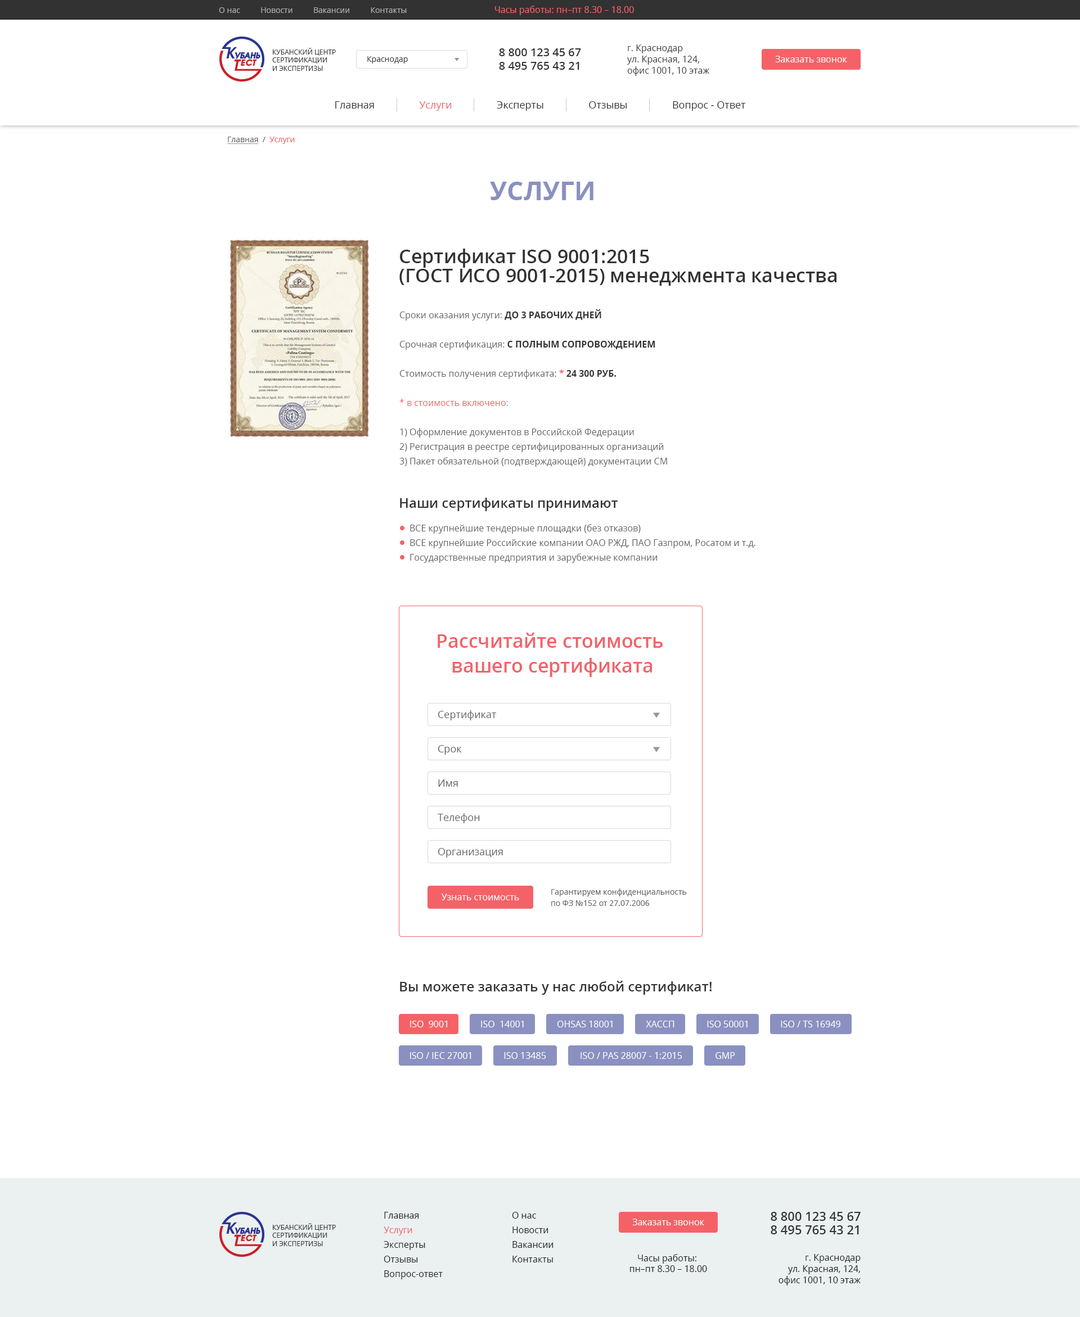
<style>
.page{position:relative;width:1080px;height:1317px;background:#ffffff}
.page>*{position:absolute;margin:0}
.t1{font:9px "OpenSans";color:#f46267}
.t2{font:7.9px "OpenSans";color:#aaaaaa}
.t3{font:6.8px "OpenSans";color:#3c3c3c;text-transform:uppercase}
.t4{font:11.2px "OpenSans-Semibold";color:#323232}
.t5{font:9px/11.2px "OpenSans";color:#3c3c3c}
.t6{font:7.9px "OpenSans";color:#3c3c3c}
.t7{font:9px "OpenSans";color:#ffffff}
.t8{font:10.1px "OpenSans";color:#323232}
.t9{font:10.1px "OpenSans";color:#f46267}
.t10{font:7.9px "OpenSans";color:#646464;text-decoration:underline}
.t11{font:7.9px "OpenSans";color:#646464}
.t12{font:7.9px "OpenSans";color:#f46267}
.t13{font:25.9px "OpenSans-Bold";color:#8a91c1;text-transform:uppercase}
.t14{font:19.1px/19.1px "OpenSans-Semibold";color:#323232}
.t15{font:9px/14.6px "OpenSans";color:#646464}
.t16{font:9px/14.6px "OpenSans-Bold";color:#323232;text-transform:uppercase}
.t17{font:9px/14.6px "OpenSans-Bold";color:#f46267}
.t18{font:9px/14.6px "OpenSans";color:#f46267}
.t19{font:13.5px "OpenSans-Semibold";color:#323232}
.t20{font:19.1px/24.8px "OpenSans-Semibold";color:#f46267}
.t21{font:10.1px "OpenSans";color:#646464}
.t22{font:7.9px/11.2px "OpenSans";color:#646464}
.t23{font:9px "OpenSans";color:#ffffff;text-transform:uppercase}
.t24{font:9px/14.6px "OpenSans";color:#1e1e1e}
.t25{font:12.4px "OpenSans-Semibold";color:#323232}
.t26{font:9px "OpenSans";color:#1e1e1e}
.t27{font:9px/11.2px "OpenSans";color:#1e1e1e}
</style>
<div class="page">
<p class="t1" style="left:495px;top:6px;width:139px;height:9px">Часы работы: пн–пт 8.30 – 18.00</p>
<p class="t2" style="left:219px;top:7px;width:188px;height:6px">О нас          Новости          Вакансии          Контакты</p>
<p class="t3" style="left:272px;top:48px;width:64px;height:23px">Кубанский центр<br>сертификации<br>и экспертизы</p>
<p class="t4" style="left:499px;top:48px;width:82px;height:8px">8 800 123 45 67</p>
<p class="t5" style="left:627px;top:44px;width:83px;height:32px">г. Краснодар<br>ул. Красная, 124, <br>офис 1001, 10 этаж</p>
<p class="t6" style="left:367px;top:56px;width:41px;height:8px">Краснодар</p>
<p class="t4" style="left:499px;top:62px;width:80px;height:8px">8 495 765 43 21</p>
<p class="t7" style="left:775px;top:56px;width:72px;height:6px">Заказать звонок</p>
<p class="t8" style="left:335px;top:101px;width:411px;height:10px">Главная                 <span class="t9">Услуги                 </span>Эксперты                 Отзывы                 Вопрос - Ответ</p>
<p class="t10" style="left:227px;top:137px;width:68px;height:7px">Главная<span class="t11">  /  </span><span class="t12">Услуги</span></p>
<p class="t13" style="left:490px;top:182px;width:103px;height:18px">Услуги</p>
<p class="t14" style="left:399px;top:249px;width:438px;height:37px">Сертификат ISO 9001:2015<br>(ГОСТ ИСО 9001-2015) менеджмента качества</p>
<p class="t15" style="left:399px;top:309px;width:268px;height:158px">Сроки оказания услуги: <span class="t16">До 3 рабочих дней<br></span><br>Срочная сертификация: <span class="t16">С полным сопровождением<br></span><br>Стоимость получения сертификата: <span class="t17">* </span><span class="t16">24 300 руб.<br><br></span><span class="t18">* в стоимость включено:<br><br></span>1) Оформление документов в Российской Федерации<br>2) Регистрация в реестре сертифицированных организаций <br>3) Пакет обязательной (подтверждающей) документации СМ</p>
<p class="t19" style="left:400px;top:498px;width:218px;height:13px">Наши сертификаты принимают</p>
<p class="t15" style="left:410px;top:524px;width:345px;height:39px">ВСЕ крупнейшие тендерные площадки (без отказов)<br>ВСЕ крупнейшие Российские компании ОАО РЖД, ПАО Газпром, Росатом и т.д.<br>Государственные предприятия и зарубежные компании</p>
<p class="t20" style="left:438px;top:633px;width:225px;height:44px;text-align:center">Рассчитайте стоимость <br>вашего сертификата</p>
<p class="t21" style="left:438px;top:710px;width:59px;height:11px">Сертификат</p>
<p class="t21" style="left:438px;top:745px;width:24px;height:10px">Срок</p>
<p class="t21" style="left:438px;top:780px;width:20px;height:7px">Имя</p>
<p class="t21" style="left:438px;top:813px;width:42px;height:11px">Телефон</p>
<p class="t21" style="left:438px;top:848px;width:65px;height:10px">Организация</p>
<p class="t7" style="left:442px;top:894px;width:77px;height:7px">Узнать стоимость</p>
<p class="t22" style="left:551px;top:889px;width:136px;height:17px">Гарантируем конфиденциальность<br>по ФЗ №152 от 27.07.2006</p>
<p class="t19" style="left:400px;top:981px;width:312px;height:14px">Вы можете заказать у нас любой сертификат!</p>
<p class="t23" style="left:410px;top:1021px;width:37px;height:7px">ISO  9001</p>
<p class="t23" style="left:481px;top:1021px;width:43px;height:7px">ISO  14001</p>
<p class="t23" style="left:557px;top:1021px;width:56px;height:7px">Ohsas 18001</p>
<p class="t23" style="left:646px;top:1021px;width:28px;height:7px">Хассп</p>
<p class="t23" style="left:707px;top:1021px;width:41px;height:7px">Iso 50001</p>
<p class="t23" style="left:781px;top:1021px;width:59px;height:7px">Iso / TS 16949</p>
<p class="t23" style="left:410px;top:1052px;width:61px;height:7px">ISO / iec 27001</p>
<p class="t23" style="left:504px;top:1052px;width:42px;height:7px">ISO 13485</p>
<p class="t23" style="left:580px;top:1052px;width:102px;height:7px">ISO / pas 28007 - 1:2015</p>
<p class="t23" style="left:716px;top:1052px;width:19px;height:7px">GMP</p>
<p class="t24" style="left:384px;top:1212px;width:59px;height:68px">Главная<br><span class="t18">Услуги<br></span>Эксперты<br>Отзывы<br>Вопрос-ответ</p>
<p class="t24" style="left:512px;top:1212px;width:42px;height:51px">О нас<br>Новости<br>Вакансии<br>Контакты</p>
<p class="t25" style="left:771px;top:1212px;width:90px;height:9px">8 800 123 45 67</p>
<p class="t3" style="left:272px;top:1223px;width:64px;height:23px">Кубанский центр<br>сертификации<br>и экспертизы</p>
<p class="t7" style="left:632px;top:1219px;width:72px;height:7px">Заказать звонок</p>
<p class="t25" style="left:771px;top:1226px;width:88px;height:9px">8 495 765 43 21</p>
<p class="t26" style="left:630px;top:1254px;width:77px;height:18px;text-align:center">Часы работы: <br>пн–пт 8.30 – 18.00</p>
<p class="t27" style="left:778px;top:1254px;width:83px;height:32px;text-align:right">г. Краснодар<br>ул. Красная, 124,<br>офис 1001, 10 этаж</p>
</div>
